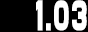
<style>
.page{position:relative;width:88px;height:32px;background:#000000}
.page>*{position:absolute;margin:0}
.t1{font:42.8px "MaximusCondensed-Bold";color:#ffffff}
</style>
<div class="page">
<p class="t1" style="left:36px;top:0px;width:51px;height:31px">1.03</p>
</div>
